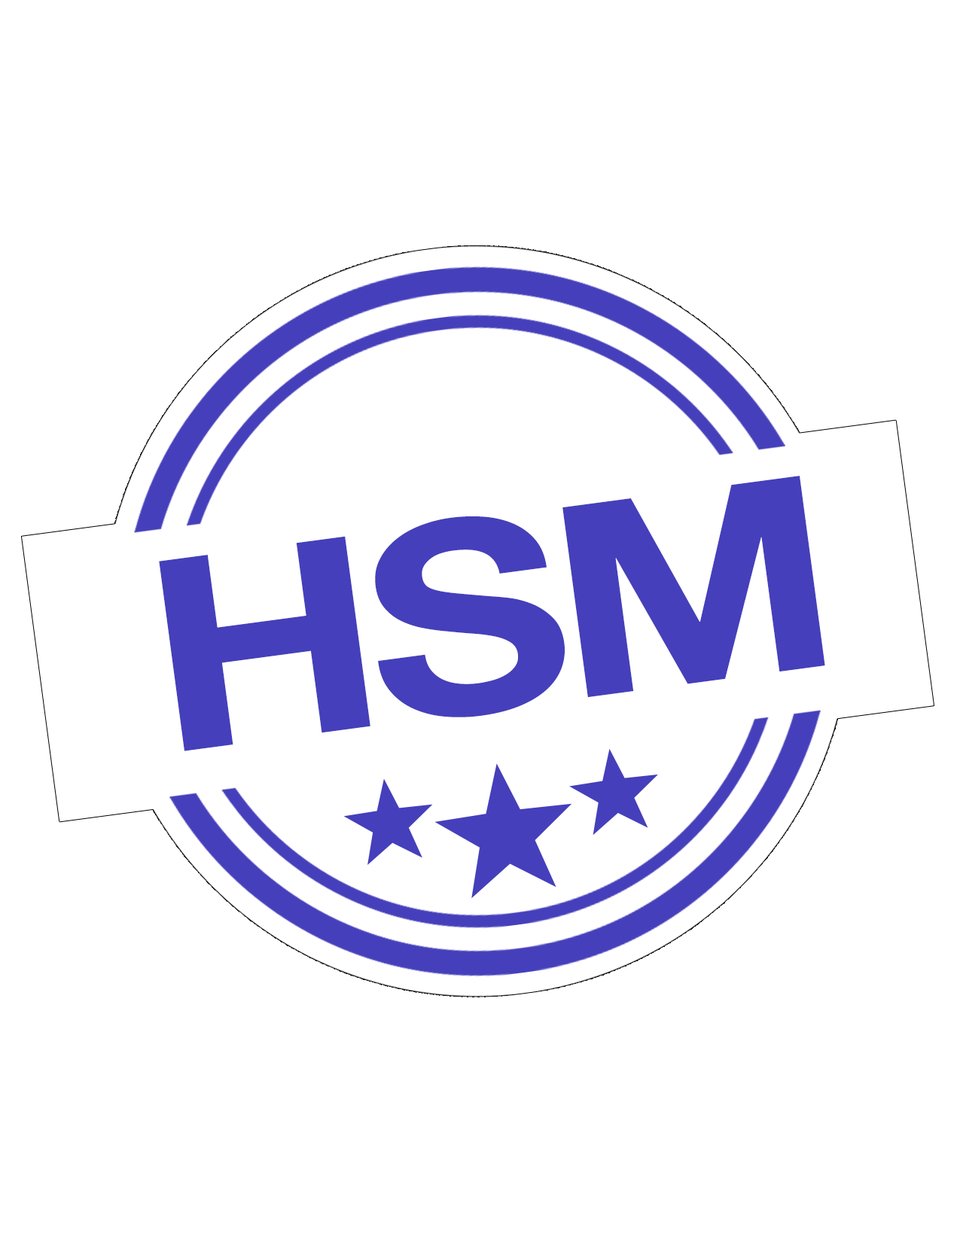
<style>
.page{position:relative;width:960px;height:1242px;background:#ffffff}
.page>*{position:absolute;margin:0}
.t1{font:267.9px "HelveticaNeue-Bold";letter-spacing:-0.04em;color:#453fbb;scale:1.16 1}
</style>
<div class="page">
<p class="t1" style="left:159px;top:476px;width:666px;height:275px;rotate:-8deg">HSM</p>
</div>
